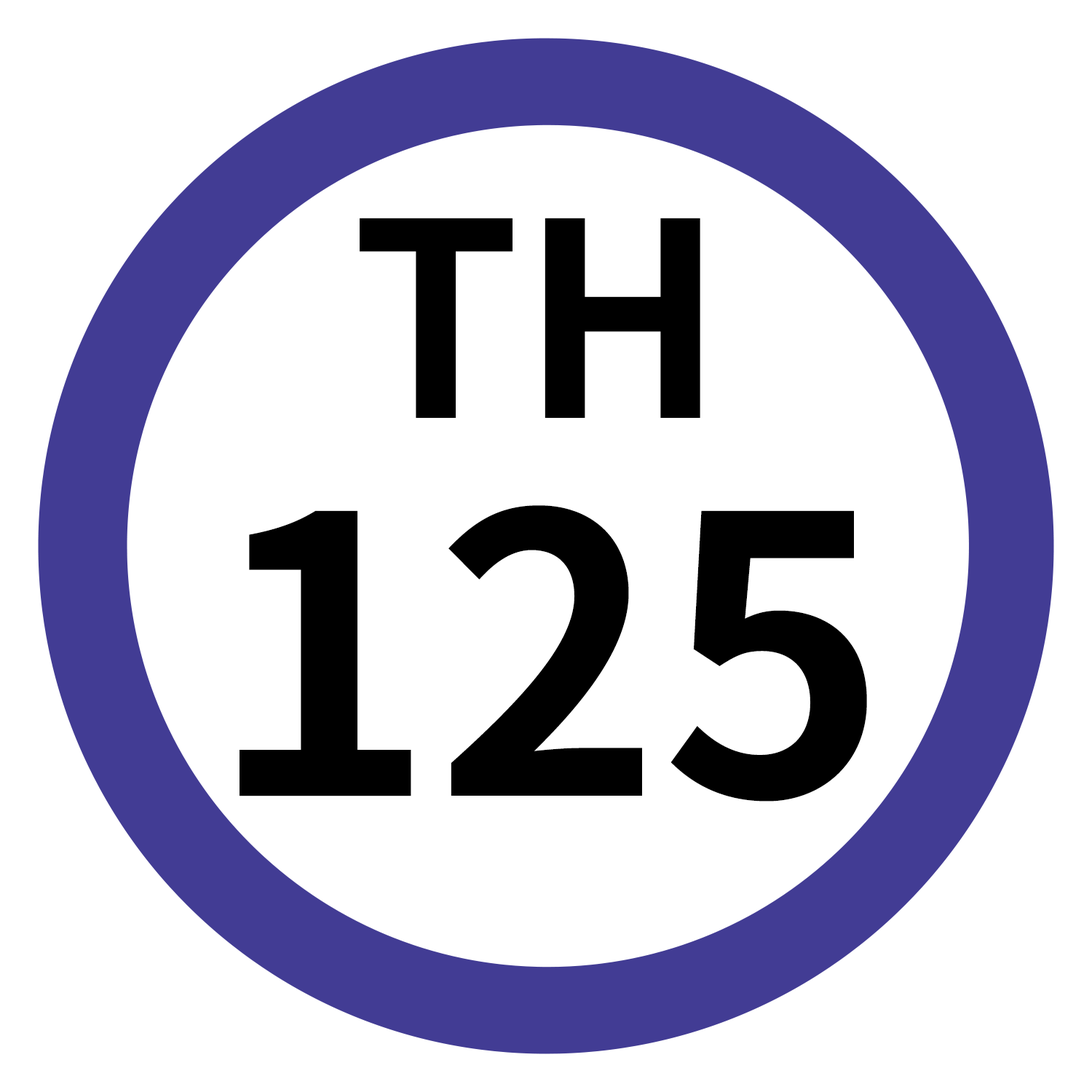
<style>
.page{position:relative;width:1092px;height:1092px;background:#ffffff}
.page>*{position:absolute;margin:0}
.t1{font:269.8px "NotoSansJP-Bold";color:#000000}
.t2{font:384.8px "NotoSansJP-Bold";color:#000000}
</style>
<div class="page">
<p class="t1" style="left:360px;top:218px;width:340px;height:200px">TH</p>
<p class="t2" style="left:240px;top:505px;width:627px;height:297px">125</p>
</div>
